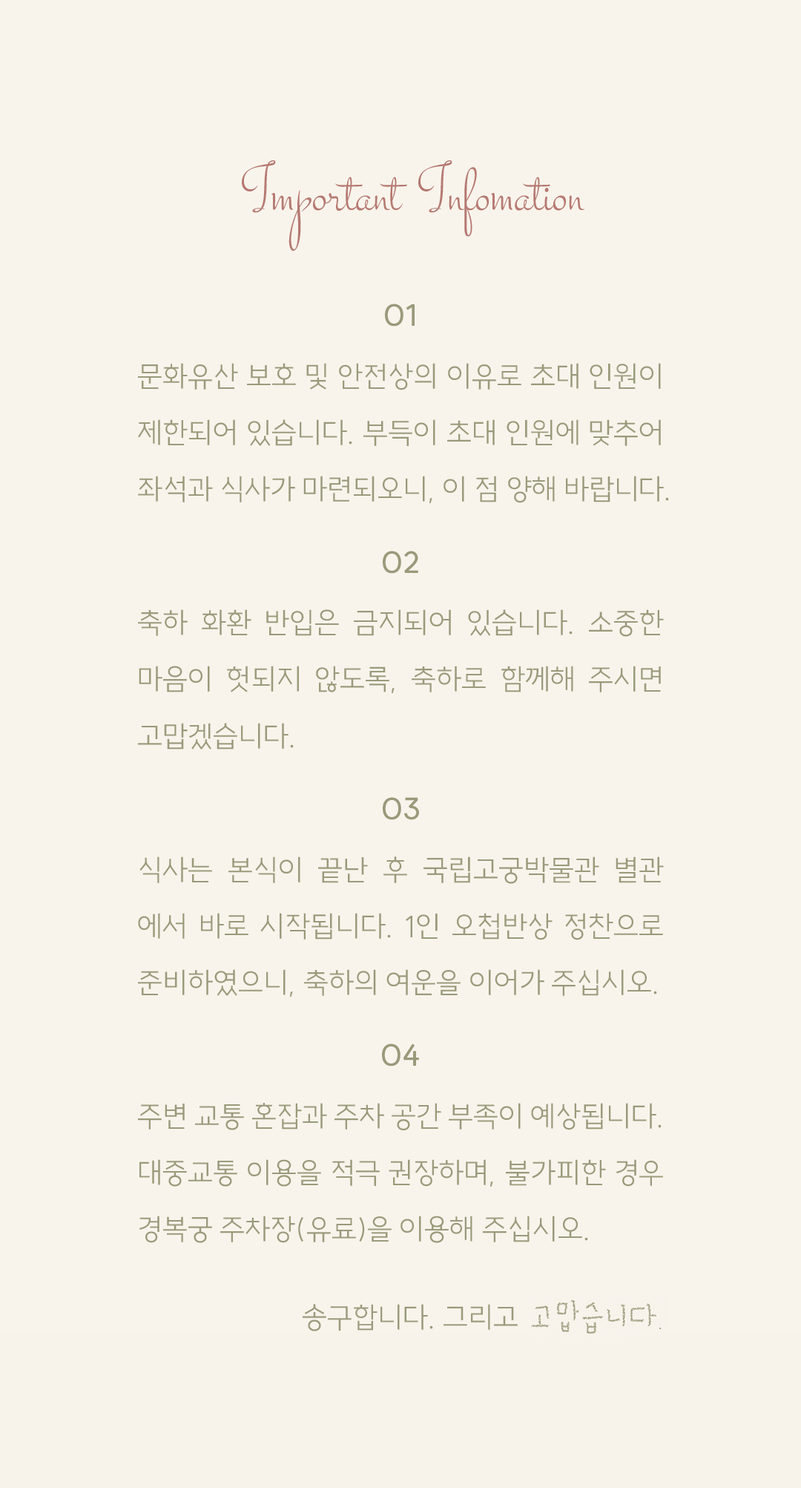
<style>
.page{position:relative;width:801px;height:1488px;background:#f8f4ec}
.page>*{position:absolute;margin:0}
.t1{font:70.7px "Stalemate-Regular";color:#b57971}
.t2{font:29.8px/56.5px "SUITE-Light";color:#9a9a7b}
.t3{font:29.8px/56.5px "SUITE-SemiBold";color:#9a9a7b}
.t4{font:29.8px/56.5px "SUITE-Light";letter-spacing:-0.002em;color:#9a9a7b}
.t5{font:29.8px/56.5px "SUITE-Light";letter-spacing:-0.005em;color:#9a9a7b}
</style>
<div class="page">
<p class="t1" style="left:242px;top:160px;width:343px;height:91px">Important  Infomation</p>
<p class="t2" style="left:138px;top:304px;width:531px;height:1027px;text-align:center"><span class="t3">01<br></span>문화유산 보호 및 안전상의 이유로 초대 인원이 제한되어 있습니다. 부득이 초대 인원에 맞추어 <span class="t4">좌석과 식사가 마련되오니, 이 점 양해 바랍니다.<br></span><span class="t3">02<br></span>축하 화환 반입은 금지되어 있습니다. 소중한 마음이 헛되지 않도록, 축하로 함께해 주시면 고맙겠습니다.<br><span class="t3">03<br></span>식사는 본식이 끝난 후 국립고궁박물관 별관 에서 바로 시작됩니다. 1인 오첩반상 정찬으로 준비하였으니, 축하의 여운을 이어가 주십시오.<br><span class="t3">04<br></span>주변 교통 혼잡과 주차 공간 부족이 예상됩니다. 대중교통 이용을 적극 권장하며, 불가피한 <span class="t5">경우 </span>경복궁 주차장(유료)을 이용해 주십시오. <br>                        송구합니다. 그리고</p>
</div>
